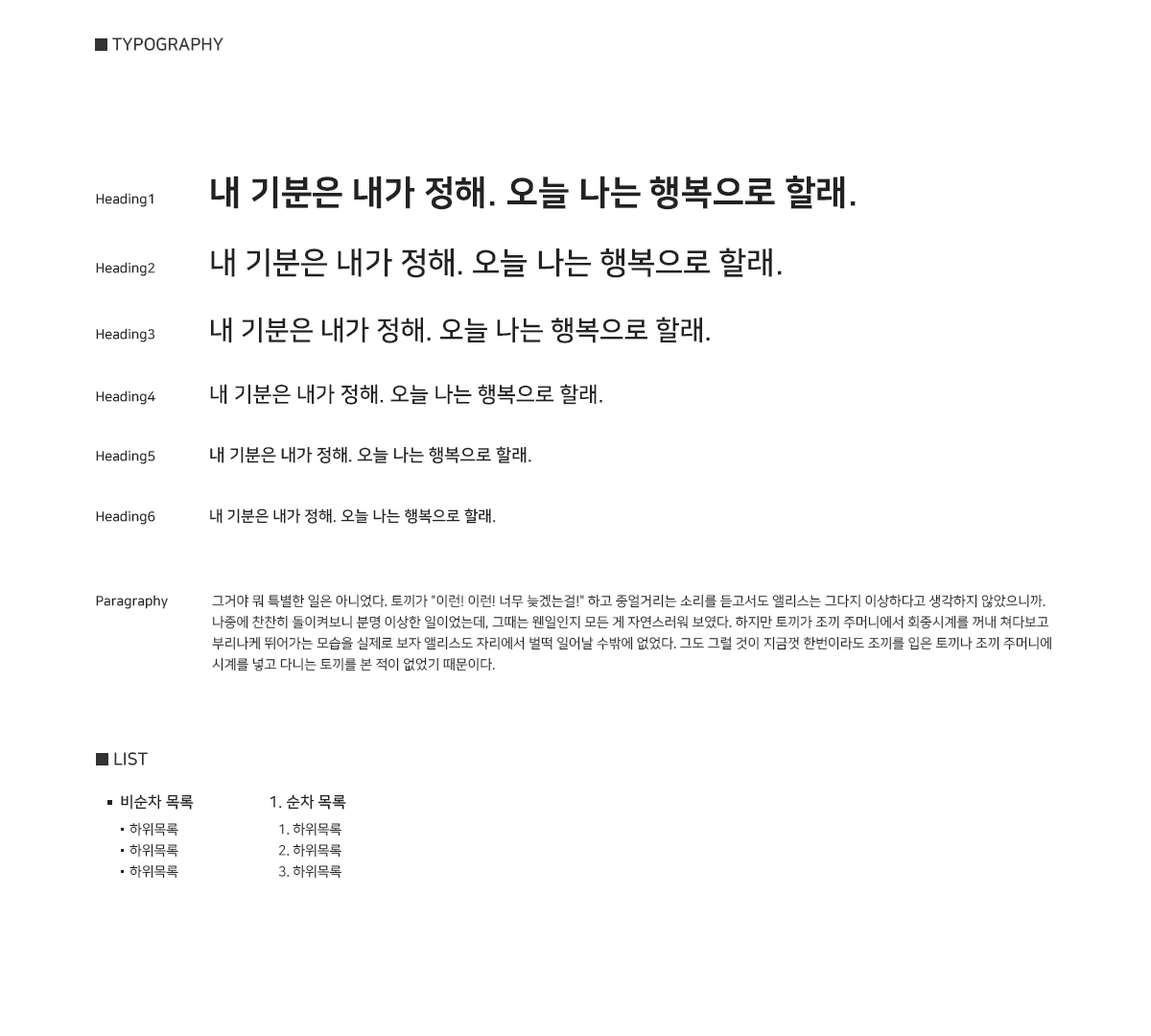
<style>
.page{position:relative;width:1151px;height:1036px;background:#ffffff}
.page>*{position:absolute;margin:0}
.t1{font:17.3px "NanumSquareB";color:#333333}
.t2{font:34.5px "NanumSquareEB";color:#222222}
.t3{font:13.4px "NanumSquareB";color:#222222}
.t4{font:30.7px "NanumSquareB";color:#222222}
.t5{font:26.9px "NanumSquareB";color:#222222}
.t6{font:21.1px "NanumSquareB";color:#222222}
.t7{font:17.3px "NanumSquareB";color:#222222}
.t8{font:15.3px "NanumSquareB";color:#222222}
.t9{font:13.4px/21.1px "NanumSquareR";color:#222222}
.t10{font:13.4px "NanumSquareR";color:#222222}
</style>
<div class="page">
<p class="t1" style="left:112px;top:37px;width:111px;height:14px">TYPOGRAPHY</p>
<p class="t2" style="left:211px;top:176px;width:645px;height:34px">내 기분은 내가 정해. 오늘 나는 행복으로 할래.</p>
<p class="t3" style="left:96px;top:193px;width:57px;height:14px">Heading1</p>
<p class="t4" style="left:211px;top:247px;width:571px;height:31px">내 기분은 내가 정해. 오늘 나는 행복으로 할래.</p>
<p class="t3" style="left:96px;top:262px;width:59px;height:14px">Heading2</p>
<p class="t5" style="left:211px;top:317px;width:499px;height:26px">내 기분은 내가 정해. 오늘 나는 행복으로 할래.</p>
<p class="t3" style="left:96px;top:328px;width:59px;height:14px">Heading3</p>
<p class="t6" style="left:210px;top:384px;width:392px;height:21px">내 기분은 내가 정해. 오늘 나는 행복으로 할래.</p>
<p class="t3" style="left:96px;top:390px;width:59px;height:15px">Heading4</p>
<p class="t3" style="left:96px;top:450px;width:59px;height:14px">Heading5</p>
<p class="t7" style="left:210px;top:446px;width:321px;height:18px">내 기분은 내가 정해. 오늘 나는 행복으로 할래.</p>
<p class="t8" style="left:210px;top:508px;width:286px;height:16px">내 기분은 내가 정해. 오늘 나는 행복으로 할래.</p>
<p class="t3" style="left:96px;top:510px;width:59px;height:15px">Heading6</p>
<p class="t9" style="left:212px;top:594px;width:839px;height:77px">그거야 뭐 특별한 일은 아니었다. 토끼가 "이런! 이런! 너무 늦겠는걸!" 하고 중얼거리는 소리를 듣고서도 앨리스는 그다지 이상하다고 생각하지 않았으니까. 나중에 찬찬히 돌이켜보니 분명 이상한 일이었는데, 그때는 웬일인지 모든 게 자연스러워 보였다. 하지만 토끼가 조끼 주머니에서 회중시계를 꺼내 쳐다보고 부리나케 뛰어가는 모습을 실제로 보자 앨리스도 자리에서 벌떡 일어날 수밖에 없었다. 그도 그럴 것이 지금껏 한번이라도 조끼를 입은 토끼나 조끼 주머니에 시계를 넣고 다니는 토끼를 본 적이 없었기 때문이다.</p>
<p class="t3" style="left:96px;top:595px;width:72px;height:14px">Paragraphy</p>
<p class="t1" style="left:114px;top:752px;width:34px;height:13px">LIST</p>
<p class="t8" style="left:121px;top:794px;width:73px;height:16px">비순차 목록</p>
<p class="t8" style="left:270px;top:794px;width:76px;height:16px">1. 순차 목록</p>
<p class="t10" style="left:129px;top:822px;width:49px;height:14px">하위목록</p>
<p class="t10" style="left:279px;top:822px;width:62px;height:14px">1. 하위목록</p>
<p class="t10" style="left:129px;top:843px;width:49px;height:15px">하위목록</p>
<p class="t10" style="left:278px;top:843px;width:63px;height:15px">2. 하위목록</p>
<p class="t10" style="left:129px;top:864px;width:49px;height:15px">하위목록</p>
<p class="t10" style="left:278px;top:864px;width:63px;height:15px">3. 하위목록</p>
</div>
